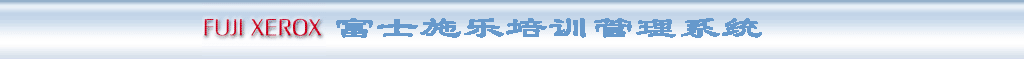
<style>
.page{position:relative;width:1024px;height:59px}
.page>*{position:absolute;margin:0}
.t1{font:30px "LiSu";color:#6699cc;font-weight:bold;scale:1.4 1}
</style>
<div class="page">
<p class="t1" style="left:336px;top:18px;width:426px;height:20px">富士施乐培训管理系统</p>
</div>
